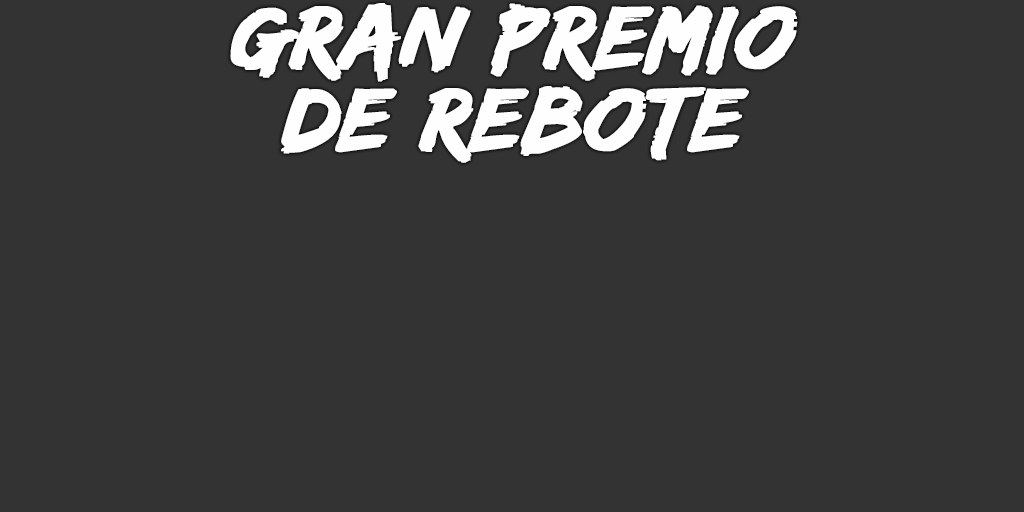
<style>
.page{position:relative;width:1024px;height:512px;background:#333333}
.page>*{position:absolute;margin:0}
.t1{font:93px/82px "EdoSZ";color:#fefefe;font-weight:bold;font-style:italic;scale:1.04 1}
</style>
<div class="page">
<p class="t1" style="left:230px;top:3px;width:568px;height:160px;text-align:center">gran premio<br>de rebote</p>
</div>
